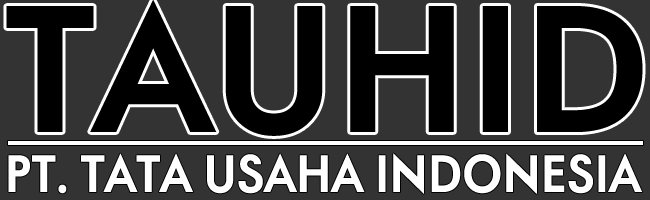
<style>
.page{position:relative;width:650px;height:200px;background:#333333}
.page>*{position:absolute;margin:0}
.t1{font:172px "AFuturaOrtoBold";color:#000000}
.t2{font:50px "AFuturaOrtoBold";color:#ffffff;scale:0.93 1}
</style>
<div class="page">
<p class="t1" style="left:6px;top:0px;width:637px;height:136px">TAUHID</p>
<p class="t2" style="left:8px;top:153px;width:635px;height:41px">PT. TATA USAHA INDONESIA</p>
</div>
